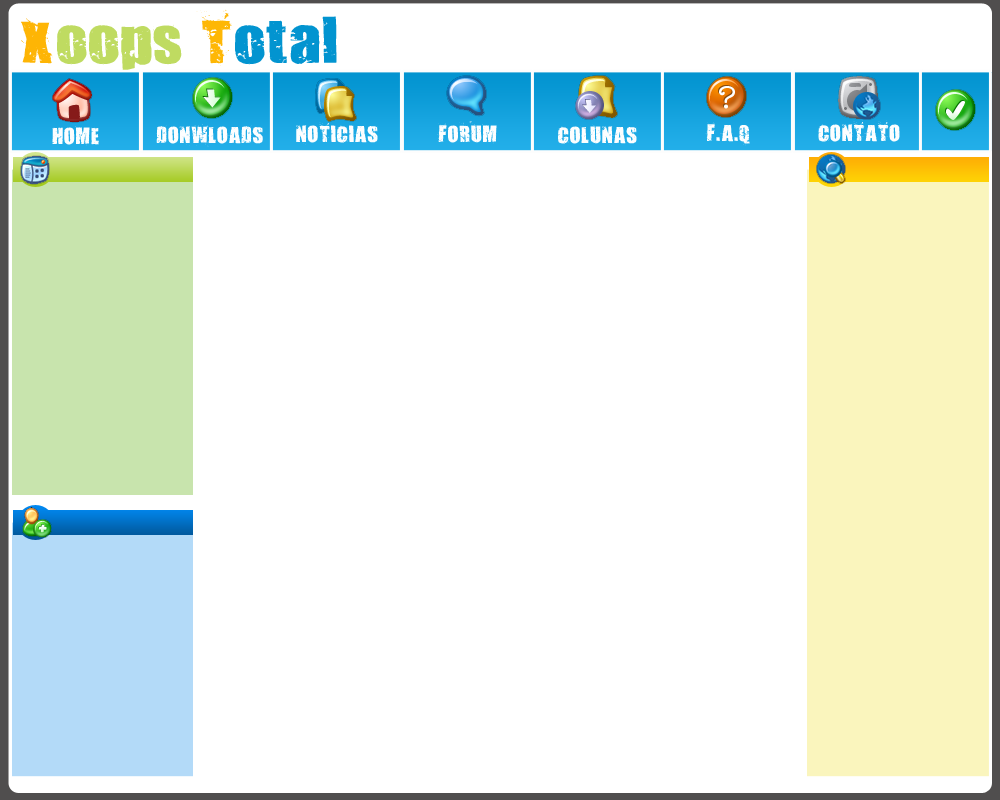
<style>
.page{position:relative;width:1000px;height:800px;background:#ffffff}
.page>*{position:absolute;margin:0}
.t1{font:52.6px "321impact";color:#bfdb61;scale:1.11 1}
.t2{font:52.6px "321impact";color:#feb505;scale:1.11 1}
.t3{font:52.6px "321impact";color:#feb705;scale:1.11 1}
.t4{font:52.6px "321impact";color:#0294d0;scale:1.11 1}
.t5{font:20px "321impact";color:#fcfeff}
</style>
<div class="page">
<p class="t1" style="left:21px;top:9px;width:316px;height:61px"><span class="t2">X</span>oops <span class="t3">T</span><span class="t4">otal</span></p>
<p class="t5" style="left:52px;top:126px;width:47px;height:20px">HOME</p>
<p class="t5" style="left:156px;top:124px;width:107px;height:23px">DONWLOADS</p>
<p class="t5" style="left:296px;top:121px;width:82px;height:24px">NOTICIAS</p>
<p class="t5" style="left:437px;top:121px;width:60px;height:23px">FORUM</p>
<p class="t5" style="left:558px;top:124px;width:79px;height:22px">COLUNAS</p>
<p class="t5" style="left:705px;top:122px;width:45px;height:24px">F.A.Q</p>
<p class="t5" style="left:818px;top:120px;width:82px;height:24px">CONTATO</p>
</div>
